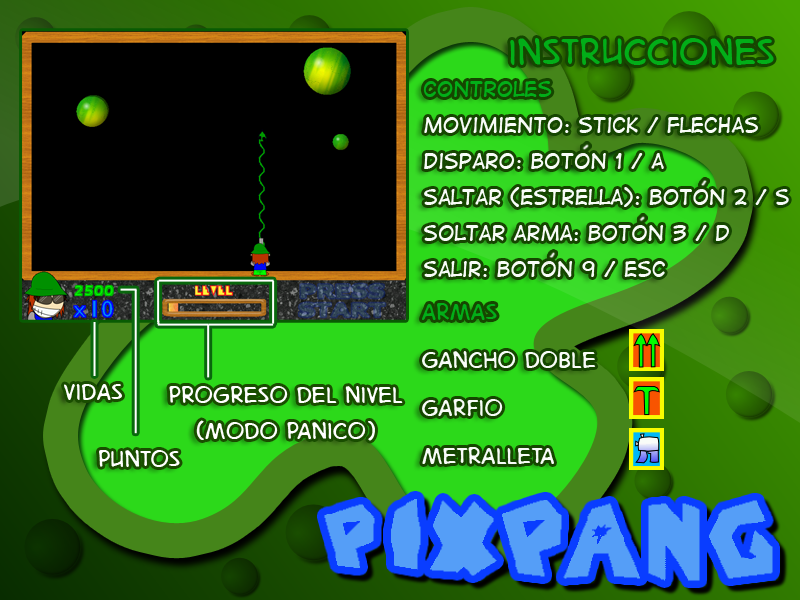
<style>
.page{position:relative;width:800px;height:600px}
.page>*{position:absolute;margin:0}
.t1{font:48px "DigitalStrip.BB";color:#02ae18}
.t2{font:20px/36px "DigitalStrip";color:#f8fcf8}
.t3{font:20px/36px "DigitalStrip";color:#02ae18}
.t4{font:30px/48px "DigitalStrip.BB";color:#f8fcf8}
.t5{font:30px/36px "DigitalStrip.BB";color:#02ae18}
.t6{font:30px "DigitalStrip.BB";color:#ffffff}
</style>
<div class="page">
<p class="t1" style="left:510px;top:38px;width:264px;height:27px">instrucciones</p>
<p class="t2" style="left:423px;top:81px;width:366px;height:196px"><span class="t3">Controles<br></span>movimiento: stick / flechas<br>disparo: boton 1 / a<br>saltar (estrella): boton 2 / s<br>soltar arma: boton 3 / d<br>salir: boton 9 / Esc</p>
<p class="t4" style="left:422px;top:303px;width:174px;height:161px"><span class="t5">armas<br></span>gancho doble<br>garfio<br>metralleta</p>
<p class="t6" style="left:64px;top:384px;width:58px;height:16px">vidas</p>
<p class="t6" style="left:169px;top:386px;width:234px;height:55px;text-align:center">progreso del nivel<br>(modo panico)</p>
<p class="t6" style="left:99px;top:450px;width:81px;height:17px">puntos</p>
</div>
